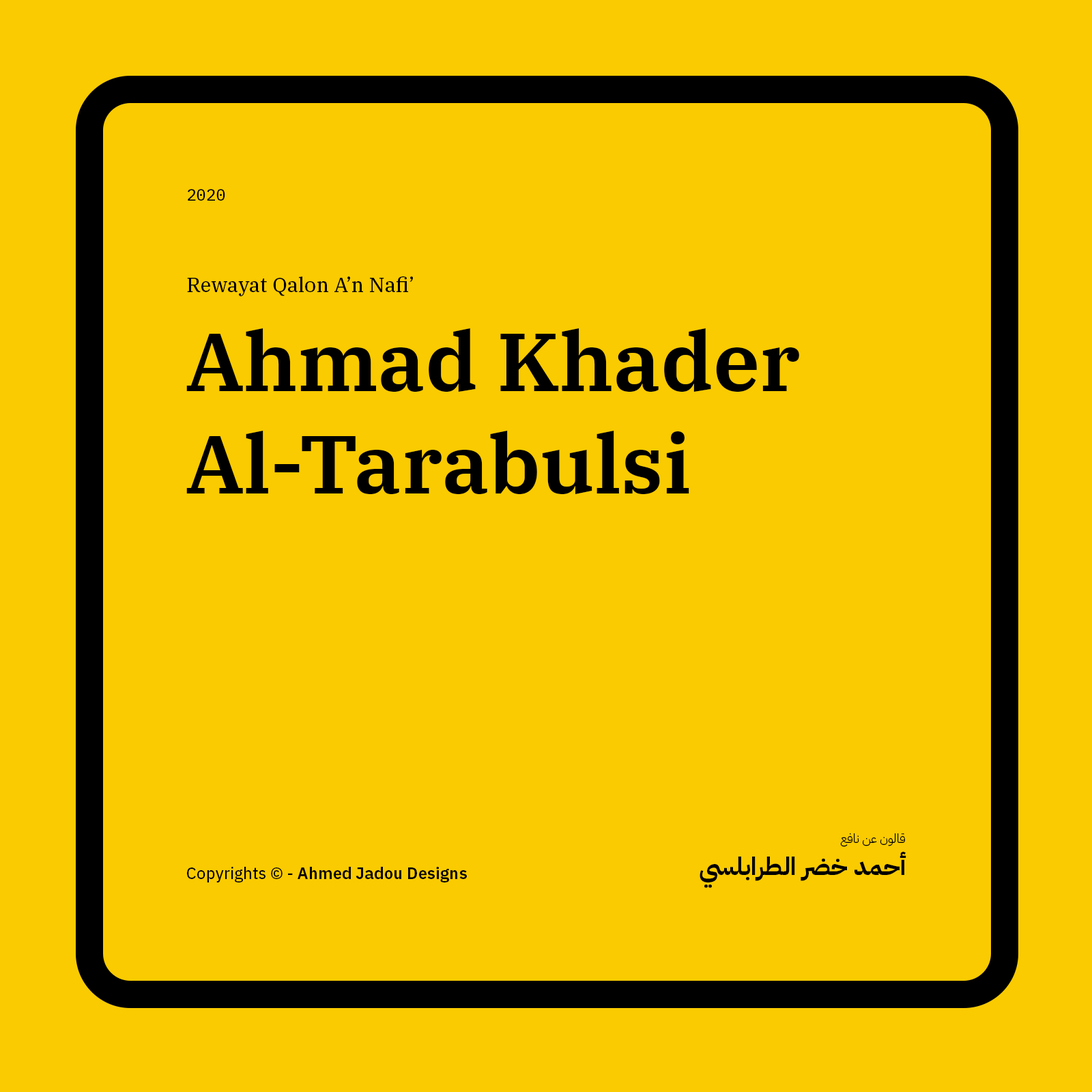
<style>
.page{position:relative;width:1092px;height:1092px;background:#facb00}
.page>*{position:absolute;margin:0}
.t1{font:16.4px "IBMPlexMono-Text";color:#000000}
.t2{font:20.5px "IBMPlexSerif-Text";color:#000000}
.t3{font:81.9px/102.7px "IBMPlexSerif-SemiBold";color:#000000}
.t4{font:12.3px "IBMPlexArabic-Light";color:#000000}
.t5{font:24.6px "IBMPlexArabic-Bold";color:#000000}
.t6{font:16.4px "IBMPlexSans-SemiBold";color:#000000}
.t7{font:16.4px "IBMPlexSans-Text";color:#000000}
</style>
<div class="page">
<p class="t1" style="left:188px;top:189px;width:37px;height:12px">2020</p>
<p class="t2" style="left:187px;top:276px;width:226px;height:20px">Rewayat Qalon A’n Nafi’</p>
<p class="t3" style="left:186px;top:328px;width:613px;height:166px">Ahmad Khader Al-Tarabulsi</p>
<p class="t4" style="left:840px;top:833px;width:65px;height:14px">قالون عن نافع</p>
<p class="t5" style="left:700px;top:852px;width:206px;height:36px">أحمد خضر الطرابلسي</p>
<p class="t6" style="left:187px;top:867px;width:280px;height:15px"><span class="t7">Copyrights © - </span>Ahmed Jadou Designs</p>
</div>
